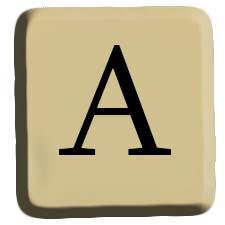
<style>
.page{position:relative;width:225px;height:225px;background:#d0c08f}
.page>*{position:absolute;margin:0}
.t1{font:160px "Sylfaen";color:#000000}
</style>
<div class="page">
<p class="t1" style="left:58px;top:45px;width:114px;height:110px">A</p>
</div>
